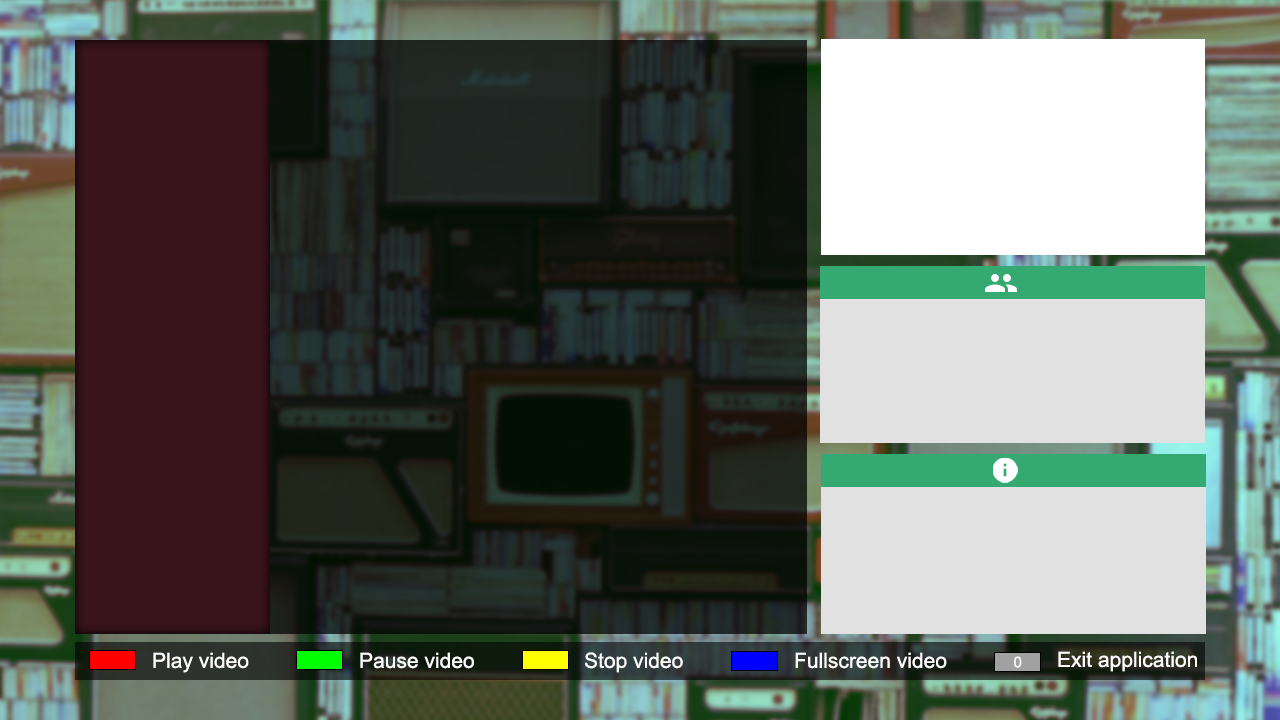
<style>
.page{position:relative;width:1280px;height:720px}
.page>*{position:absolute;margin:0}
.t1{font:21px "ArialMT";color:#fefefe}
.t2{font:15px "ArialMT";color:#fefefe}
</style>
<div class="page">
<p class="t1" style="left:153px;top:652px;width:96px;height:21px">Play video</p>
<p class="t1" style="left:360px;top:652px;width:114px;height:17px">Pause video</p>
<p class="t1" style="left:585px;top:652px;width:98px;height:21px">Stop video</p>
<p class="t1" style="left:795px;top:652px;width:152px;height:17px">Fullscreen video</p>
<p class="t1" style="left:1058px;top:651px;width:139px;height:21px">Exit application</p>
<p class="t2" style="left:1014px;top:656px;width:8px;height:12px">0</p>
</div>
